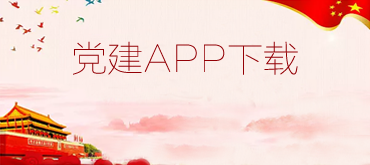
<style>
.page{position:relative;width:370px;height:165px}
.page>*{position:absolute;margin:0}
.t1{font:36px "FZLTCXHJW--GB1-0";color:#930005}
</style>
<div class="page">
<p class="t1" style="left:73px;top:41px;width:225px;height:34px">党建APP下载</p>
</div>
